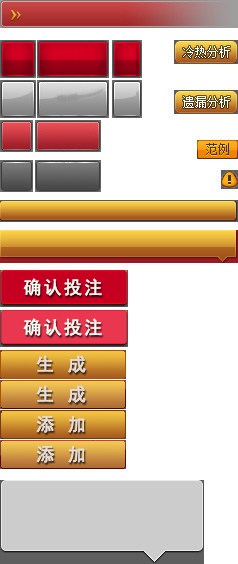
<style>
.page{position:relative;width:238px;height:564px;background:#ffffff}
.page>*{position:absolute;margin:0}
.t1{font:18px "SimHei";letter-spacing:0.1em;color:#f6fcf2;font-weight:bold}
.t2{font:18px "SimHei";letter-spacing:0.1em;color:#e7dddd;font-weight:bold}
</style>
<div class="page">
<p class="t1" style="left:23px;top:278px;width:79px;height:18px">确认投注</p>
<p class="t1" style="left:23px;top:318px;width:79px;height:18px">确认投注</p>
<p class="t2" style="left:36px;top:355px;width:50px;height:18px">生 成</p>
<p class="t2" style="left:36px;top:385px;width:50px;height:18px">生 成</p>
<p class="t2" style="left:36px;top:416px;width:49px;height:17px">添 加</p>
<p class="t2" style="left:36px;top:446px;width:49px;height:17px">添 加</p>
</div>
